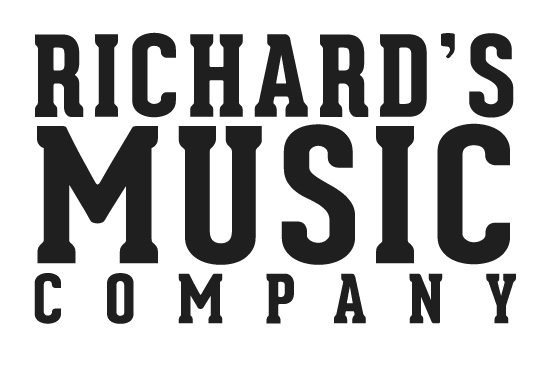
<style>
.page{position:relative;width:550px;height:372px;background:#ffffff}
.page>*{position:absolute;margin:0}
.t1{font:110px/146.7px "GearedSlab-Extrabold";color:#1f1f1f}
.t2{font:183.3px/146.7px "GearedSlab-Extrabold";color:#1f1f1f}
.t3{font:66px/60px "GearedSlab-Extrabold";color:#1f1f1f}
</style>
<div class="page">
<p class="t1" style="left:34px;top:32px;width:482px;height:292px;text-align:justify">RICHARD’S<br><span class="t2">MUSIC<br></span><span class="t3">COMPANY</span></p>
</div>
